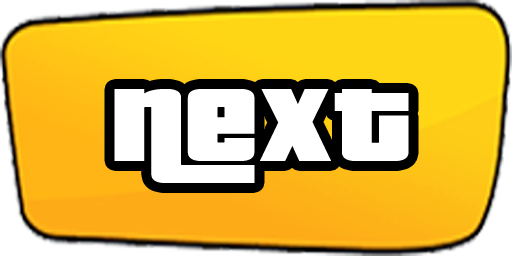
<style>
.page{position:relative;width:512px;height:256px;background:#ffffff}
.page>*{position:absolute;margin:0}
.t1{font:112.9px "PricedownBl-Regular";letter-spacing:0.012em;color:#ffffff;scale:1.26 1}
</style>
<div class="page">
<p class="t1" style="left:114px;top:89px;width:295px;height:94px">Next</p>
</div>
